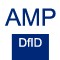
<style>
.page{position:relative;width:60px;height:60px;background:#ffffff}
.page>*{position:absolute;margin:0}
.t1{font:23.7px "ArialMT";color:#002878}
.t2{font:11.8px "ArialMT";color:#ffffff}
</style>
<div class="page">
<p class="t1" style="left:5px;top:8px;width:51px;height:18px">AMP</p>
<p class="t2" style="left:19px;top:38px;width:23px;height:9px">DfID</p>
</div>
